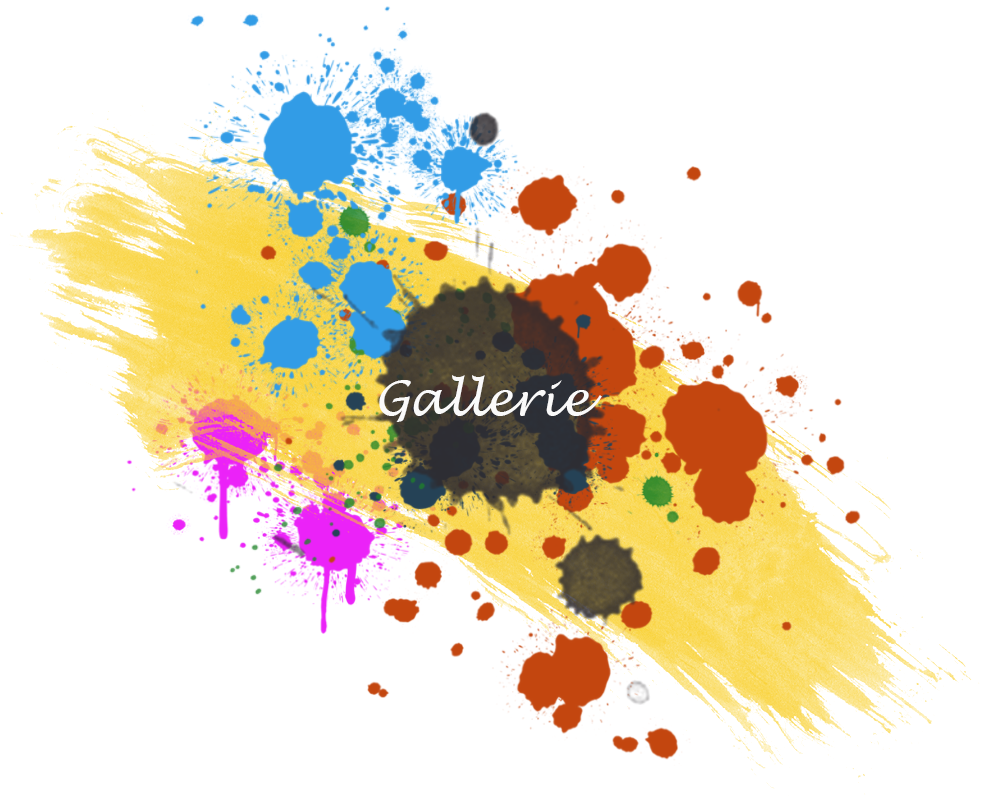
<style>
.page{position:relative;width:998px;height:796px;background:#ffffff}
.page>*{position:absolute;margin:0}
.t1{font:48px "LucidaHandwriting-Italic";color:#fafafa}
</style>
<div class="page">
<p class="t1" style="left:379px;top:375px;width:223px;height:47px">Gallerie</p>
</div>
